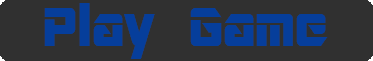
<style>
.page{position:relative;width:373px;height:61px;background:#303030}
.page>*{position:absolute;margin:0}
.t1{font:60px "ARDESTINE";color:#063e9b}
</style>
<div class="page">
<p class="t1" style="left:44px;top:3px;width:284px;height:56px">Play Game</p>
</div>
